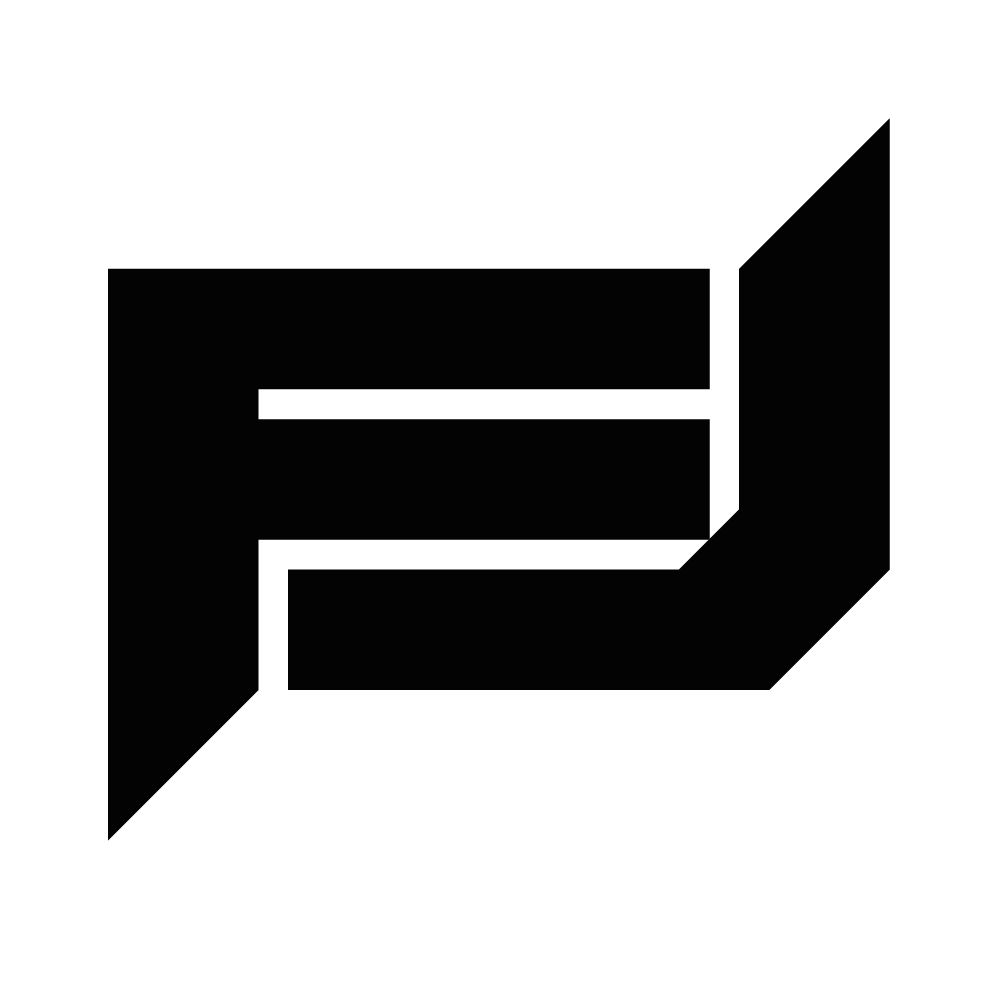
<style>
.page{position:relative;width:1002px;height:1002px;background:#ffffff}
.page>*{position:absolute;margin:0}
.t1{font:616px "FoughtKnightVictory";color:#030303}
</style>
<div class="page">
<p class="t1" style="left:288px;top:118px;width:602px;height:572px">J</p>
<p class="t1" style="left:108px;top:268px;width:602px;height:573px">F</p>
</div>
